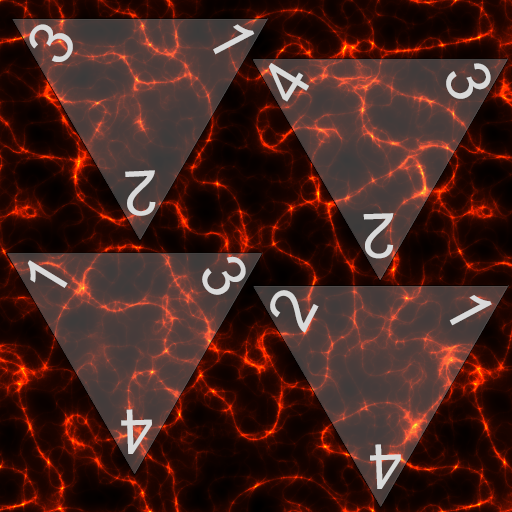
<style>
.page{position:relative;width:512px;height:512px}
.page>*{position:absolute;margin:0}
.t1{font:62.1px "ArialMT";letter-spacing:0.016em;color:#d4d4d4}
.t2{font:60.9px "ArialMT";letter-spacing:0.016em;color:#d4d4d4}
.t3{font:61.7px "ArialMT";letter-spacing:0.016em;color:#d4d4d4}
</style>
<div class="page">
<p class="t1" style="left:29px;top:24px;width:44px;height:38px;rotate:-57deg">3</p>
<p class="t2" style="left:213px;top:24px;width:42px;height:31px;rotate:65deg">1</p>
<p class="t1" style="left:268px;top:63px;width:41px;height:39px;rotate:-58deg">4</p>
<p class="t1" style="left:446px;top:63px;width:45px;height:36px;rotate:69deg">3</p>
<p class="t1" style="left:125px;top:170px;width:31px;height:46px;rotate:177deg">2</p>
<p class="t1" style="left:363px;top:213px;width:31px;height:46px;rotate:178deg">2</p>
<p class="t1" style="left:202px;top:256px;width:44px;height:39px;rotate:60deg">3</p>
<p class="t3" style="left:27px;top:260px;width:41px;height:28px;rotate:-58deg">1</p>
<p class="t1" style="left:270px;top:290px;width:49px;height:43px;rotate:-63deg">2</p>
<p class="t1" style="left:449px;top:295px;width:43px;height:31px;rotate:62deg">1</p>
<p class="t1" style="left:121px;top:409px;width:31px;height:45px;rotate:178deg">4</p>
<p class="t1" style="left:370px;top:444px;width:31px;height:45px;rotate:178deg">4</p>
</div>
